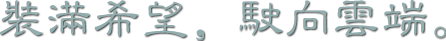
<style>
.page{position:relative;width:446px;height:41px;background:#ffffff}
.page>*{position:absolute;margin:0}
.t1{font:48px "FZLBFW--GB1-0";color:#92adae}
</style>
<div class="page">
<p class="t1" style="left:0px;top:0px;width:446px;height:41px">装满希望，驶向云端。</p>
</div>
